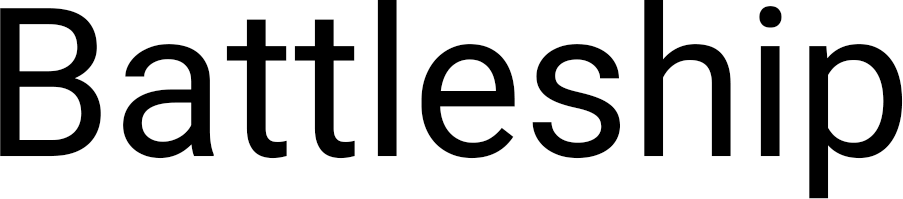
<style>
.page{position:relative;width:903px;height:199px;background:#ffffff}
.page>*{position:absolute;margin:0}
.t1{font:208.3px "Roboto-Regular";color:#000000}
</style>
<div class="page">
<p class="t1" style="left:0px;top:0px;width:903px;height:199px">Battleship</p>
</div>
